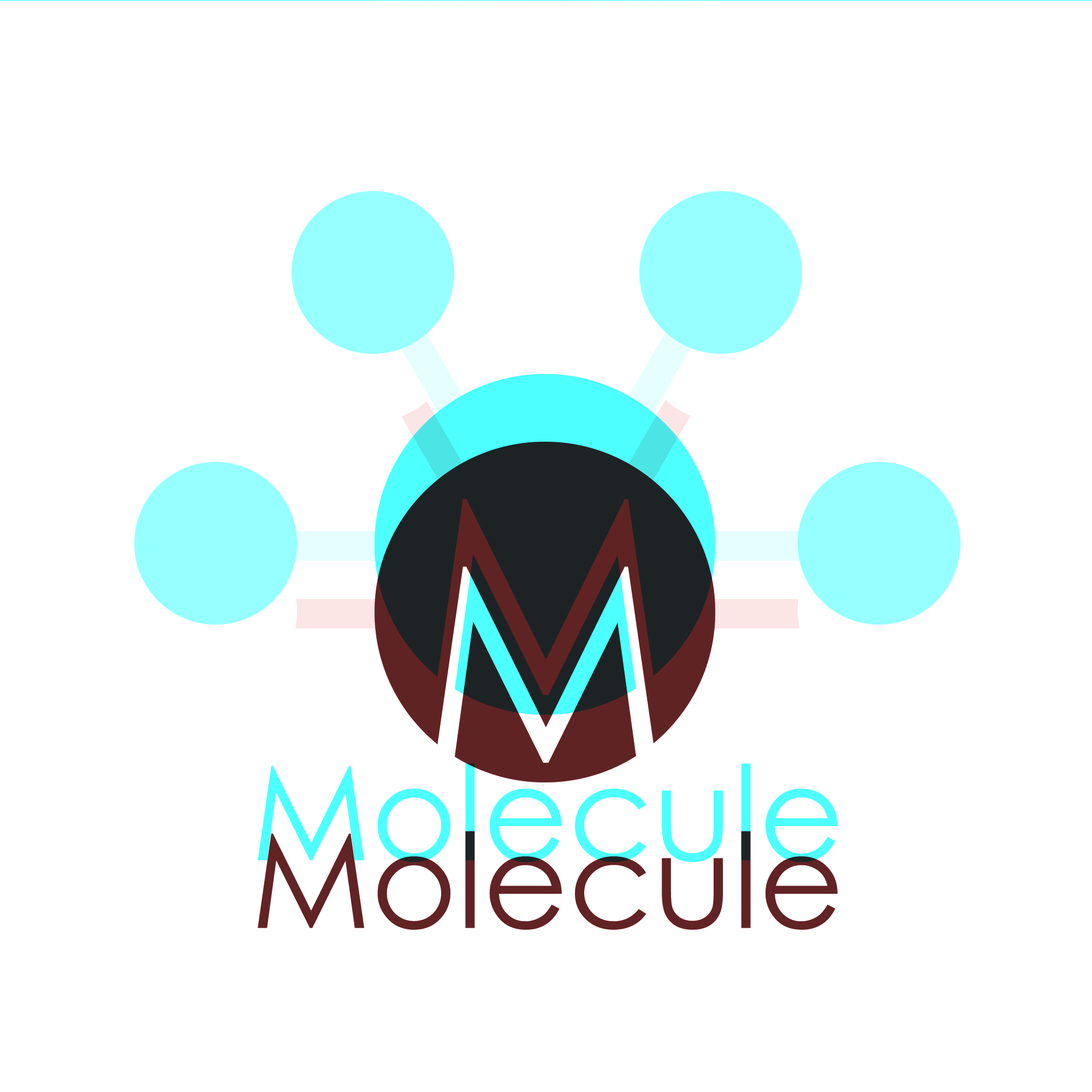
<style>
.page{position:relative;width:1092px;height:1092px;background:#ffffff}
.page>*{position:absolute;margin:0}
.t1{font:273px "CenturyGothic";color:#602324}
.t2{font:131px "CenturyGothic";color:#4dffff}
</style>
<div class="page">
<p class="t1" style="left:435px;top:498px;width:221px;height:197px">M</p>
<p class="t2" style="left:258px;top:763px;width:580px;height:99px">Molecule</p>
</div>
